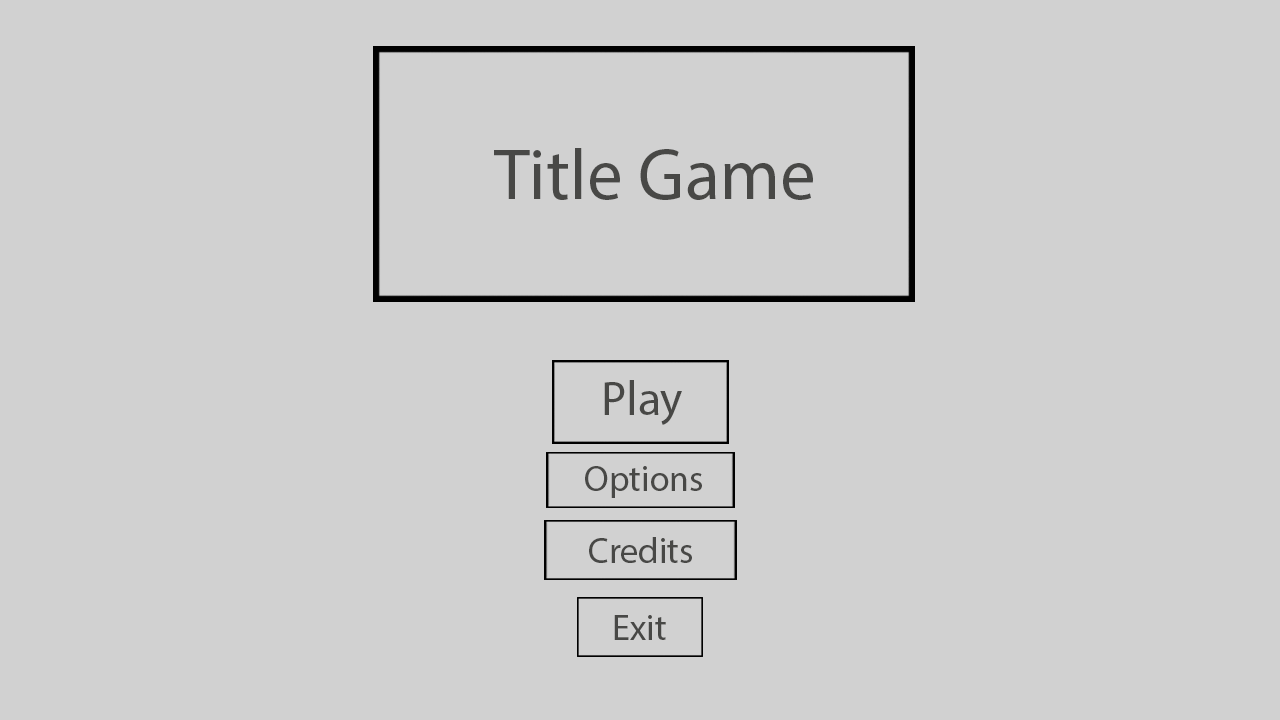
<style>
.page{position:relative;width:1280px;height:720px;background:#d1d1d1}
.page>*{position:absolute;margin:0}
.t1{font:72px "MyriadPro-Regular";color:#484846}
.t2{font:48px "MyriadPro-Regular";color:#484846}
.t3{font:36px "MyriadPro-Regular";color:#484846}
</style>
<div class="page">
<p class="t1" style="left:494px;top:148px;width:319px;height:52px">Title Game</p>
<p class="t2" style="left:604px;top:380px;width:78px;height:45px">Play</p>
<p class="t3" style="left:585px;top:466px;width:117px;height:32px">Options</p>
<p class="t3" style="left:589px;top:537px;width:103px;height:26px">Credits</p>
<p class="t3" style="left:614px;top:615px;width:52px;height:25px">Exit</p>
</div>
